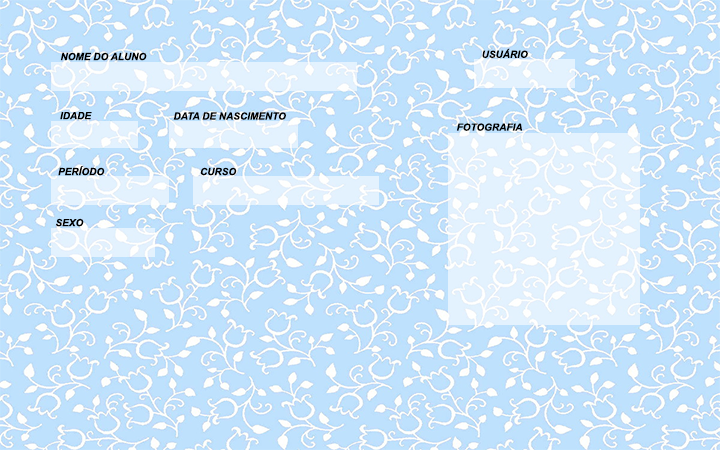
<style>
.page{position:relative;width:720px;height:450px}
.page>*{position:absolute;margin:0}
.t1{font:10px "Arial-BoldItalicMT";color:#000000}
</style>
<div class="page">
<p class="t1" style="left:60px;top:52px;width:87px;height:9px">NOME DO ALUNO</p>
<p class="t1" style="left:482px;top:48px;width:46px;height:10px">USUÁRIO</p>
<p class="t1" style="left:60px;top:112px;width:32px;height:8px">IDADE</p>
<p class="t1" style="left:173px;top:112px;width:113px;height:8px">DATA DE NASCIMENTO</p>
<p class="t1" style="left:456px;top:123px;width:67px;height:8px">FOTOGRAFIA</p>
<p class="t1" style="left:58px;top:166px;width:47px;height:10px">PERÍODO</p>
<p class="t1" style="left:200px;top:167px;width:37px;height:9px">CURSO</p>
<p class="t1" style="left:56px;top:218px;width:28px;height:9px">SEXO</p>
</div>
